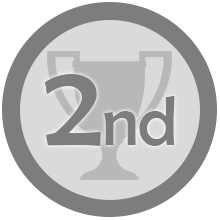
<style>
.page{position:relative;width:220px;height:220px;background:#dadada}
.page>*{position:absolute;margin:0}
.t1{font:70px "BerlinSansFB-Reg";color:#7d7d7d}
.t2{font:120px "BerlinSansFB-Reg";color:#7d7d7d}
</style>
<div class="page">
<p class="t1" style="left:44px;top:74px;width:131px;height:72px"><span class="t2">2</span>nd</p>
</div>
